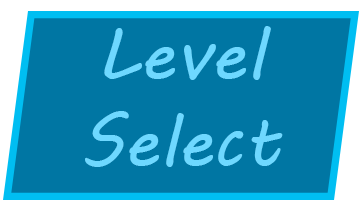
<style>
.page{position:relative;width:360px;height:216px;background:#0076a3}
.page>*{position:absolute;margin:0}
.t1{font:72px "MVBoli";color:#6ed9ff}
</style>
<div class="page">
<p class="t1" style="left:85px;top:26px;width:198px;height:141px;text-align:center">Level<br>Select</p>
</div>
